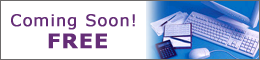
<style>
.page{position:relative;width:260px;height:60px;background:#ffffff}
.page>*{position:absolute;margin:0}
.t1{font:16px "Verdana";letter-spacing:0.05em;color:#652d77;font-weight:bold}
.t2{font:20px "Verdana-Bold";letter-spacing:0.05em;color:#652d77;font-weight:bold}
</style>
<div class="page">
<p class="t1" style="left:11px;top:14px;width:124px;height:16px">Coming Soon!</p>
<p class="t2" style="left:48px;top:33px;width:59px;height:16px">FREE</p>
</div>
